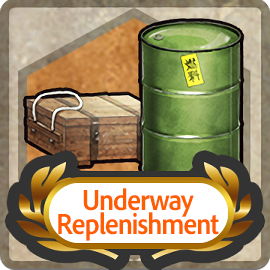
<style>
.page{position:relative;width:270px;height:270px}
.page>*{position:absolute;margin:0}
.t1{font:30px/24px "AdobeClean-Bold";letter-spacing:-0.04em;color:#ff5d00;scale:0.9 1}
</style>
<div class="page">
<p class="t1" style="left:58px;top:188px;width:161px;height:53px;text-align:center">Underway<br>Replenishment</p>
</div>
